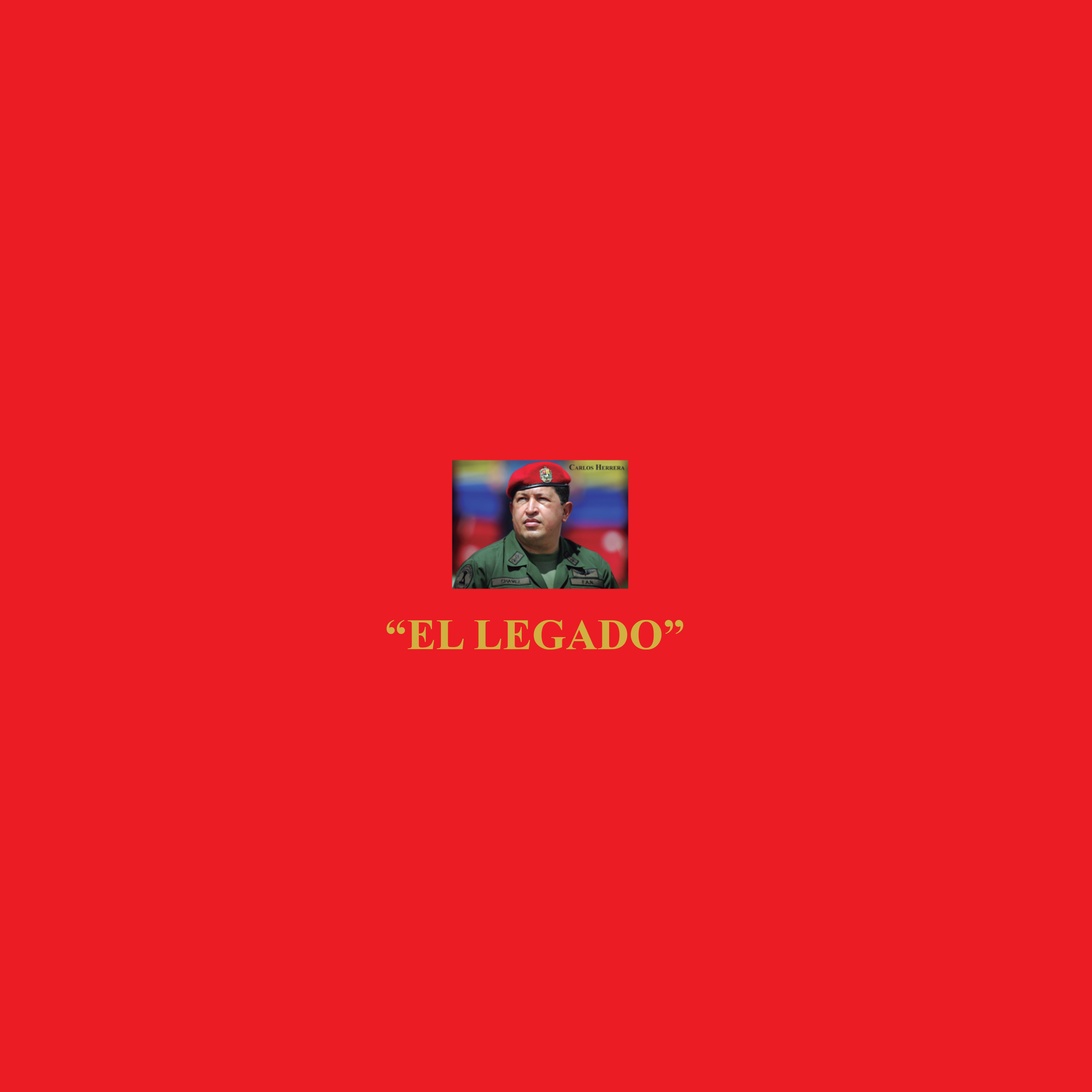
<style>
.page{position:relative;width:1092px;height:1092px;background:#eb1c24}
.page>*{position:absolute;margin:0}
.t1{font:43.7px "TimesNewRomanPS-BoldMT";color:#d0b040}
</style>
<div class="page">
<p class="t1" style="left:387px;top:620px;width:296px;height:30px">“EL LEGADO”</p>
</div>
